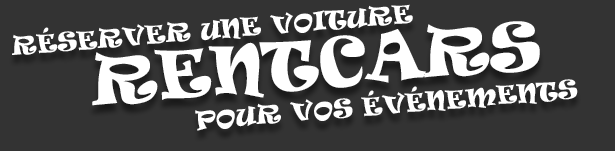
<style>
.page{position:relative;width:615px;height:151px;background:#333333}
.page>*{position:absolute;margin:0}
.t1{font:24px/59px "Ravie";color:#ffffff;text-transform:uppercase}
.t2{font:32px/59px "Ravie";color:#ffffff;text-transform:uppercase}
.t3{font:63.3px/56px "Ravie";color:#ffffff;text-transform:uppercase}
.t4{font:24px/33px "Ravie";color:#ffffff;text-transform:uppercase}
</style>
<div class="page">
<p class="t1" style="left:12px;top:4px;width:566px;height:127px;text-align:center;rotate:-5deg"><span class="t2">   </span>Réserver une voiture                   <span class="t3"><br> RENTCARS<br>                </span><span class="t4">pour vos événements</span></p>
</div>
